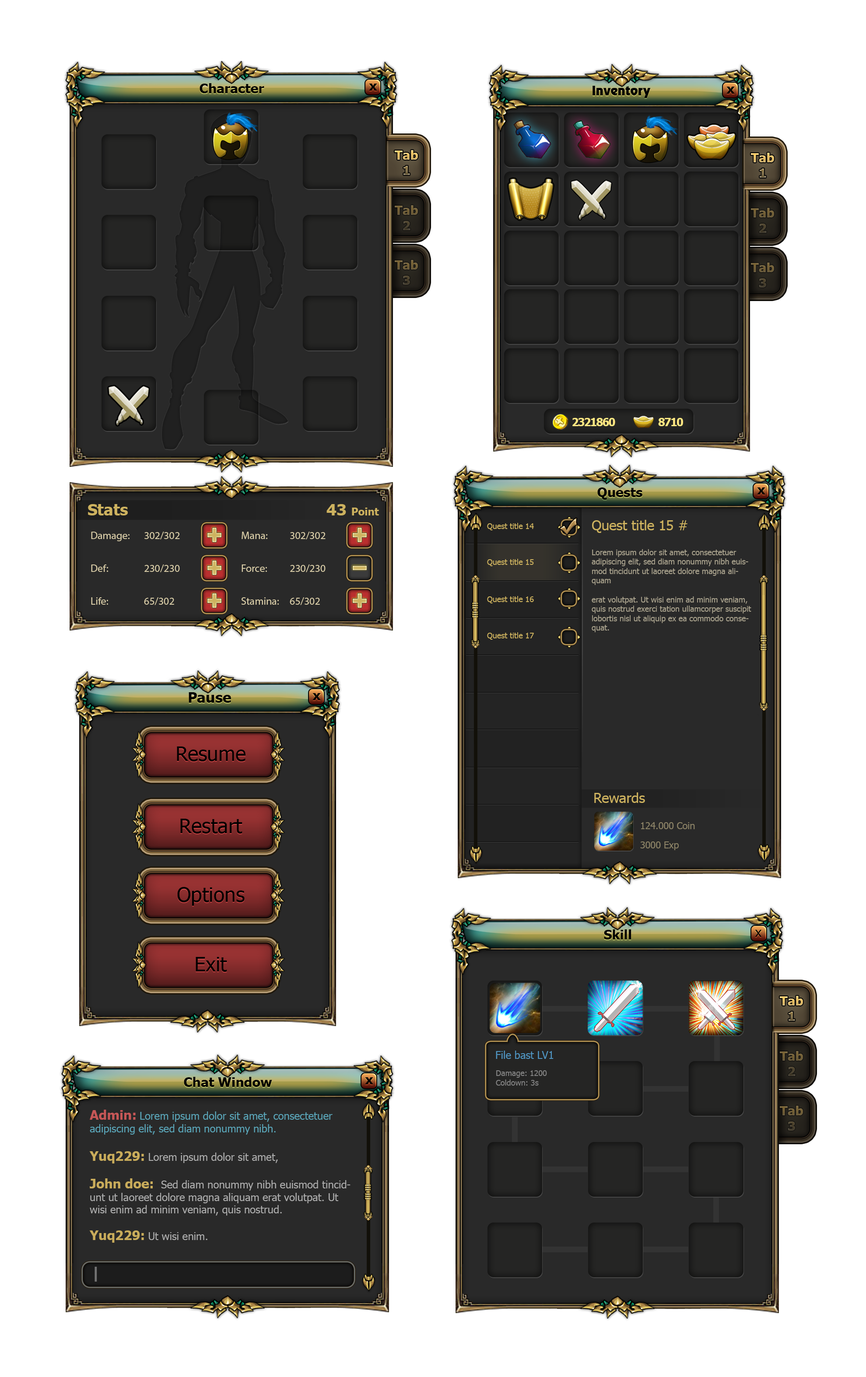
<style>
.page{position:relative;width:866px;height:1377px;background:#ffffff}
.page>*{position:absolute;margin:0}
.t1{font:13.2px "Tahoma-Bold";color:#000000}
.t2{font:12.7px "Tahoma-Bold"}
.t3{font:12.7px "Tahoma-Bold";color:#705f38}
.t4{font:12.7px "Tahoma-Bold";color:#705f39}
.t5{font:11.1px "Tahoma-Bold";letter-spacing:-0.075em;color:#ffe782}
.t6{font:15.8px "Tahoma-Bold";color:#cdb25f}
.t7{font:10.5px "Tahoma-Bold";color:#cdb25f}
.t8{font:13.8px "Tahoma";color:#cdb25f}
.t9{font:10.5px/32.8px "MyriadPro-Regular";color:#d9cda8}
.t10{font:7.9px "Tahoma";color:#cdb25f}
.t11{font:7.9px "Tahoma";color:#a9a28d}
.t12{font:14.5px "Tahoma-Bold";color:#000000}
.t13{font:20.2px "Tahoma";color:#000000}
.t14{font:9.5px "Tahoma";color:#8b8266}
.t15{font:13.2px "Tahoma";color:#000000}
.t16{font:10.5px "Tahoma";color:#5096c3}
.t17{font:7.9px "Tahoma";color:#838383}
.t18{font:10.5px "Tahoma";color:#5ba6b9}
.t19{font:13.1px "Tahoma-Bold";color:#c65757}
.t20{font:10.5px "Tahoma";color:#aeaeae}
.t21{font:13.1px "Tahoma-Bold";color:#c9ac5b}
.t22{font:15.4px "Tahoma-Bold";color:#737373;scale:0.97 1}
</style>
<div class="page">
<p class="t1" style="left:200px;top:83px;width:64px;height:10px">Character</p>
<p class="t1" style="left:369px;top:84px;width:8px;height:7px">x</p>
<p class="t1" style="left:726px;top:87px;width:9px;height:7px">x</p>
<p class="t2" style="left:395px;top:150px;width:23px;height:25px;text-align:center">Tab<br>1</p>
<p class="t2" style="left:751px;top:153px;width:23px;height:25px;text-align:center">Tab<br>1</p>
<p class="t3" style="left:395px;top:205px;width:23px;height:25px;text-align:center">Tab<br>2</p>
<p class="t3" style="left:751px;top:208px;width:23px;height:25px;text-align:center">Tab<br>2</p>
<p class="t4" style="left:395px;top:260px;width:23px;height:25px;text-align:center">Tab<br>3</p>
<p class="t3" style="left:751px;top:263px;width:23px;height:24px;text-align:center">Tab<br>3</p>
<p class="t5" style="left:572px;top:418px;width:43px;height:8px">2321860</p>
<p class="t5" style="left:658px;top:418px;width:25px;height:8px">8710</p>
<p class="t1" style="left:597px;top:487px;width:45px;height:13px">Quests</p>
<p class="t1" style="left:757px;top:487px;width:8px;height:7px">x</p>
<p class="t6" style="left:88px;top:504px;width:40px;height:11px">Stats</p>
<p class="t7" style="left:326px;top:504px;width:53px;height:11px"><span class="t6">43 </span>Point</p>
<p class="t8" style="left:592px;top:520px;width:95px;height:13px">Quest title 15 #</p>
<p class="t9" style="left:91px;top:532px;width:39px;height:73px">Damage:<br>Def:<br>Life:</p>
<p class="t9" style="left:144px;top:532px;width:36px;height:73px">302/302<br>230/230<br>65/302</p>
<p class="t9" style="left:241px;top:532px;width:38px;height:73px">Mana:<br>Force:<br>Stamina:</p>
<p class="t9" style="left:290px;top:532px;width:36px;height:73px">302/302<br>230/230<br>65/302</p>
<p class="t10" style="left:487px;top:523px;width:47px;height:7px">Quest title 14</p>
<p class="t11" style="left:592px;top:549px;width:159px;height:83px">Lorem ipsum dolor sit amet, consectetuer adipiscing elit, sed diam nonummy nibh euismod tincidunt ut laoreet dolore magna aliquam <br><br>erat volutpat. Ut wisi enim ad minim veniam, quis nostrud exerci tation ullamcorper suscipit lobortis nisl ut aliquip ex ea commodo consequat. <br><br><br><br><br><br><br><br><br><br><br><br><br><br><br><br><br>cumsan et iusto odio dignissim qui blandit praesent luptatum zzril delenit augue duis dolore te feugait nulla facilisi. Nam liber tempor cum soluta nobis eleifend option</p>
<p class="t10" style="left:487px;top:559px;width:47px;height:7px">Quest title 15</p>
<p class="t10" style="left:487px;top:596px;width:47px;height:7px">Quest title 16</p>
<p class="t10" style="left:487px;top:632px;width:47px;height:8px">Quest title 17</p>
<p class="t12" style="left:189px;top:692px;width:42px;height:11px">Pause</p>
<p class="t1" style="left:312px;top:693px;width:9px;height:7px">x</p>
<p class="t13" style="left:177px;top:746px;width:68px;height:15px">Resume</p>
<p class="t8" style="left:594px;top:792px;width:51px;height:11px">Rewards</p>
<p class="t13" style="left:180px;top:819px;width:62px;height:15px">Restart</p>
<p class="t14" style="left:641px;top:822px;width:54px;height:7px">124.000 Coin</p>
<p class="t14" style="left:640px;top:841px;width:39px;height:9px">3000 Exp</p>
<p class="t13" style="left:177px;top:887px;width:68px;height:19px">Options</p>
<p class="t1" style="left:604px;top:929px;width:27px;height:10px">Skill</p>
<p class="t15" style="left:755px;top:930px;width:7px;height:7px">x</p>
<p class="t13" style="left:196px;top:957px;width:31px;height:15px">Exit</p>
<p class="t2" style="left:780px;top:996px;width:23px;height:25px;text-align:center">Tab<br>1</p>
<p class="t16" style="left:496px;top:1051px;width:58px;height:8px">File bast LV1</p>
<p class="t3" style="left:780px;top:1051px;width:23px;height:25px;text-align:center">Tab<br>2</p>
<p class="t17" style="left:496px;top:1070px;width:51px;height:16px">Damage: 1200<br>Coldown: 3s</p>
<p class="t1" style="left:184px;top:1077px;width:88px;height:10px">Chat Window</p>
<p class="t1" style="left:365px;top:1077px;width:8px;height:7px">x</p>
<p class="t18" style="left:90px;top:1110px;width:243px;height:25px"><span class="t19">Admin: </span>Lorem ipsum dolor sit amet, consectetuer adipiscing elit, sed diam nonummy nibh.</p>
<p class="t3" style="left:780px;top:1106px;width:23px;height:25px;text-align:center">Tab<br>3</p>
<p class="t20" style="left:89px;top:1151px;width:189px;height:12px"><span class="t21">Yuq229: </span>Lorem ipsum dolor sit amet,</p>
<p class="t20" style="left:90px;top:1178px;width:260px;height:38px"><span class="t21">John doe:  </span>Sed diam nonummy nibh euismod tincidunt ut laoreet dolore magna aliquam erat volutpat. Ut wisi enim ad minim veniam, quis nostrud.</p>
<p class="t20" style="left:89px;top:1230px;width:118px;height:13px"><span class="t21">Yuq229: </span>Ut wisi enim.</p>
<p class="t22" style="left:95px;top:1267px;width:2px;height:15px">|</p>
</div>
